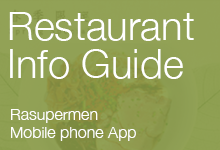
<style>
.page{position:relative;width:220px;height:150px}
.page>*{position:absolute;margin:0}
.t1{font:40px/38px "HelveticaNeue-Light";color:#ffffff}
.t2{font:16px/18px "HelveticaNeue-Light";color:#ffffff}
</style>
<div class="page">
<p class="t1" style="left:9px;top:12px;width:185px;height:67px">Restaurant<br>Info Guide</p>
<p class="t2" style="left:11px;top:109px;width:125px;height:32px">Rasupermen<br>Mobile phone App</p>
</div>
